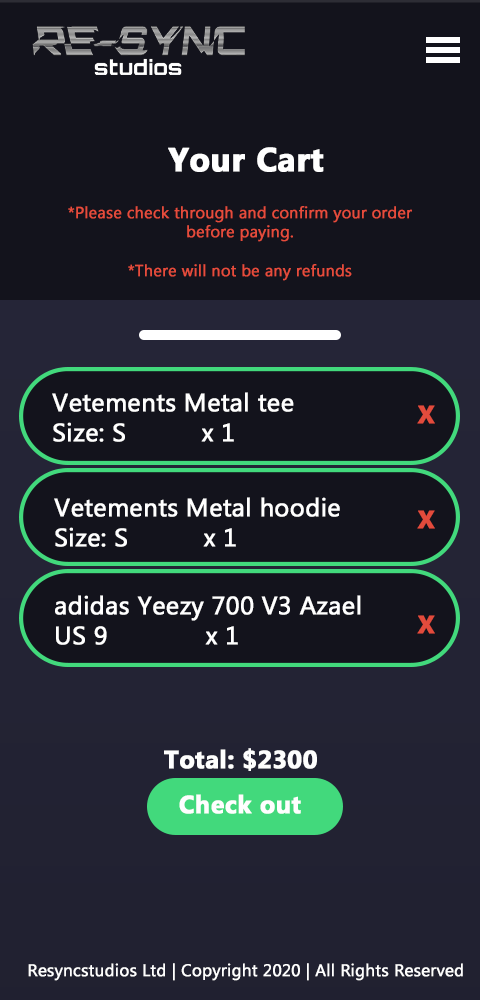
<style>
.page{position:relative;width:480px;height:1000px;background:#13131c}
.page>*{position:absolute;margin:0}
.t1{font:33.3px "MicrosoftTaiLe-Bold";color:#ffffff;font-weight:bold}
.t2{font:16px "MicrosoftTaiLe";color:#e64c3c;font-weight:bold}
.t3{font:25px "MicrosoftTaiLe";color:#ffffff;font-weight:bold}
.t4{font:25px "MicrosoftTaiLe-Bold";color:#e34b3c;font-weight:bold}
.t5{font:25px "MicrosoftTaiLe-Bold";color:#fefefe;font-weight:bold}
.t6{font:16.7px "MicrosoftTaiLe";color:#ffffff;font-weight:bold}
</style>
<div class="page">
<p class="t1" style="left:168px;top:147px;width:156px;height:25px">Your Cart</p>
<p class="t2" style="left:68px;top:206px;width:344px;height:75px;text-align:center">*Please check through and confirm your order before paying.<br><br>*There will not be any refunds</p>
<p class="t3" style="left:52px;top:392px;width:242px;height:50px">Vetements Metal tee<br>Size: S          x 1</p>
<p class="t4" style="left:417px;top:405px;width:18px;height:19px">X</p>
<p class="t3" style="left:54px;top:497px;width:286px;height:50px">Vetements Metal hoodie<br>Size: S          x 1</p>
<p class="t4" style="left:417px;top:510px;width:18px;height:19px">X</p>
<p class="t3" style="left:55px;top:595px;width:306px;height:50px">adidas Yeezy 700 V3 Azael<br>US 9             x 1</p>
<p class="t4" style="left:417px;top:615px;width:18px;height:19px">X</p>
<p class="t5" style="left:164px;top:748px;width:153px;height:23px">Total: $2300</p>
<p class="t5" style="left:179px;top:794px;width:122px;height:20px">Check out</p>
<p class="t6" style="left:28px;top:963px;width:435px;height:18px">Resyncstudios Ltd | Copyright 2020 | All Rights Reserved</p>
</div>
